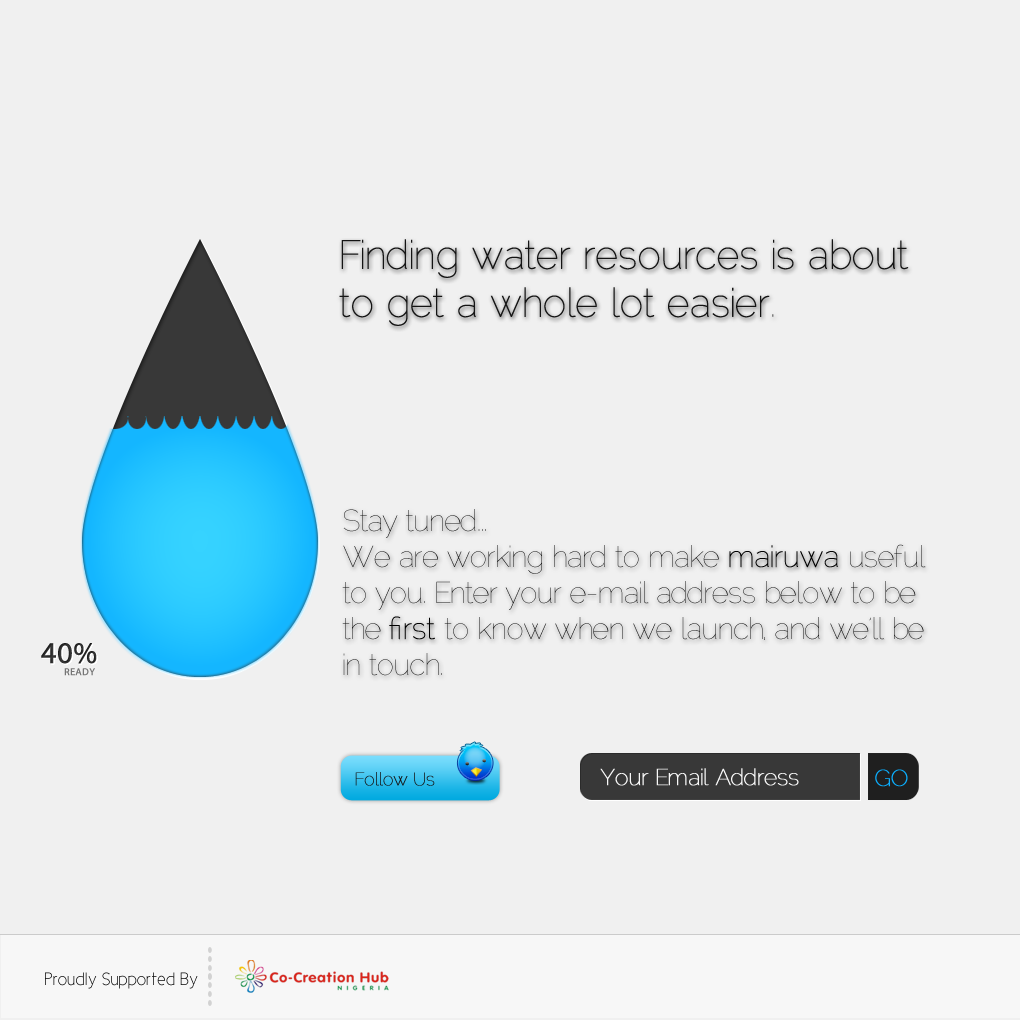
<style>
.page{position:relative;width:1020px;height:1020px;background:#f0f0f0}
.page>*{position:absolute;margin:0}
.t1{font:40px "Raleway-Thin";letter-spacing:-0.04em;color:#141414;font-weight:bold}
.t2{font:40px "Raleway-Thin";letter-spacing:-0.04em;color:#141414}
.t3{font:30px "Raleway-Thin";letter-spacing:-0.04em;color:#141414}
.t4{font:30px "Raleway-Thin";letter-spacing:-0.04em;color:#000000;font-weight:bold}
.t5{font:30px "MyriadPro-Regular";color:#2c2c2c;font-weight:bold}
.t6{font:10px "MyriadPro-Regular";letter-spacing:0.025em;color:#757575;font-weight:bold}
.t7{font:18px "Raleway-Thin";letter-spacing:-0.04em;color:#141414;font-weight:bold}
.t8{font:23px "Raleway-Thin";letter-spacing:-0.04em;color:#f8f8f8;font-weight:bold}
.t9{font:23px "Raleway-Thin";letter-spacing:-0.04em;color:#0bafff;font-weight:bold}
.t10{font:18px "CicleFina"}
</style>
<div class="page">
<p class="t1" style="left:339px;top:239px;width:570px;height:87px">Finding water resources is about <br>to get a whole lot easier<span class="t2">.</span></p>
<p class="t3" style="left:342px;top:509px;width:584px;height:167px">Stay tuned...<br>We are working hard to make <span class="t4">mairuwa</span> useful to you. Enter your e-mail address below to be the <span class="t4">first </span>to know when we launch, and we’ll be in touch.</p>
<p class="t5" style="left:41px;top:643px;width:56px;height:21px">40%</p>
<p class="t6" style="left:64px;top:668px;width:31px;height:8px">READY</p>
<p class="t7" style="left:355px;top:772px;width:80px;height:14px">Follow Us</p>
<p class="t8" style="left:600px;top:768px;width:199px;height:18px">Your Email Address</p>
<p class="t9" style="left:875px;top:769px;width:33px;height:18px">GO</p>
<p class="t10" style="left:45px;top:972px;width:153px;height:17px">Proudly Supported By</p>
</div>
